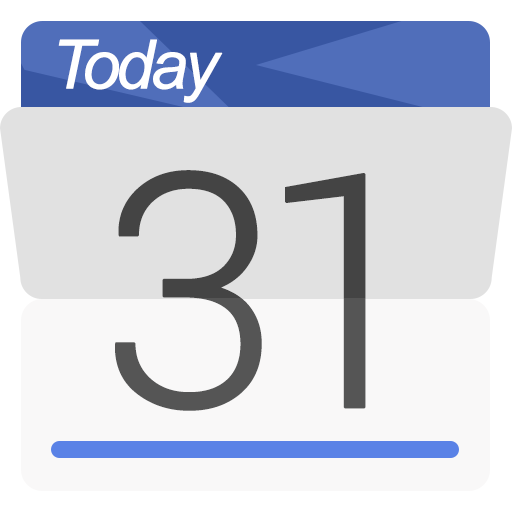
<style>
.page{position:relative;width:512px;height:512px;background:#e1e1e1}
.page>*{position:absolute;margin:0}
.t1{font:67.5px "Arial-ItalicMT";letter-spacing:-0.08em;color:#ffffff;font-weight:bold}
.t2{font:325.7px "Roboto-Light";letter-spacing:-0.1em;color:#555555;font-weight:bold}
</style>
<div class="page">
<p class="t1" style="left:58px;top:39px;width:165px;height:64px">Today</p>
<p class="t2" style="left:115px;top:170px;width:251px;height:241px">31</p>
</div>
